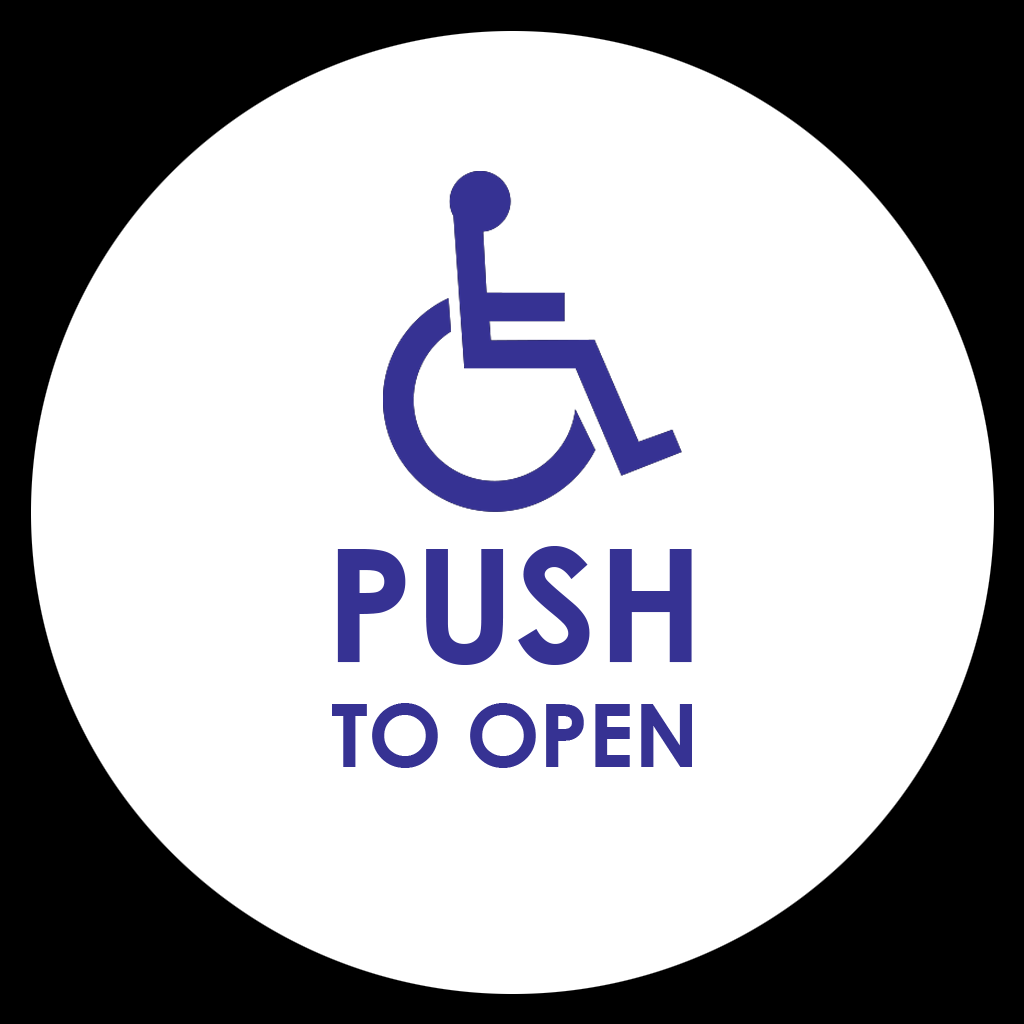
<style>
.page{position:relative;width:1024px;height:1024px;background:#ffffff}
.page>*{position:absolute;margin:0}
.t1{font:87.5px "CenturyGothic-Bold";color:#363293}
.t2{font:158.3px "CenturyGothic-Bold";color:#363293}
</style>
<div class="page">
<p class="t1" style="left:332px;top:546px;width:360px;height:222px;text-align:center"><span class="t2">PUSH<br></span>TO OPEN</p>
</div>
